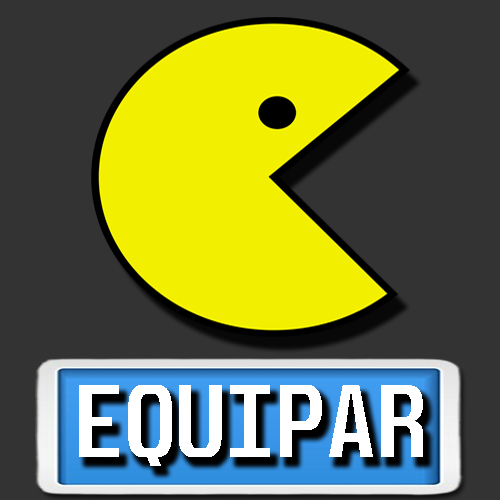
<style>
.page{position:relative;width:500px;height:500px;background:#333333}
.page>*{position:absolute;margin:0}
.t1{font:88.1px "Unispace-Bold";color:#ffffff;scale:0.94 1}
.t2{font:87.7px "Unispace-Bold";color:#ffffff;scale:0.94 1}
</style>
<div class="page">
<p class="t1" style="left:79px;top:385px;width:344px;height:81px">EQUIPA<span class="t2">R</span></p>
</div>
